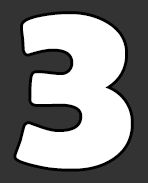
<style>
.page{position:relative;width:148px;height:183px;background:#333333}
.page>*{position:absolute;margin:0}
.t1{font:250px "BerlinSansFBDemi-Bold";color:#ffffff}
</style>
<div class="page">
<p class="t1" style="left:16px;top:14px;width:115px;height:155px">3</p>
</div>
